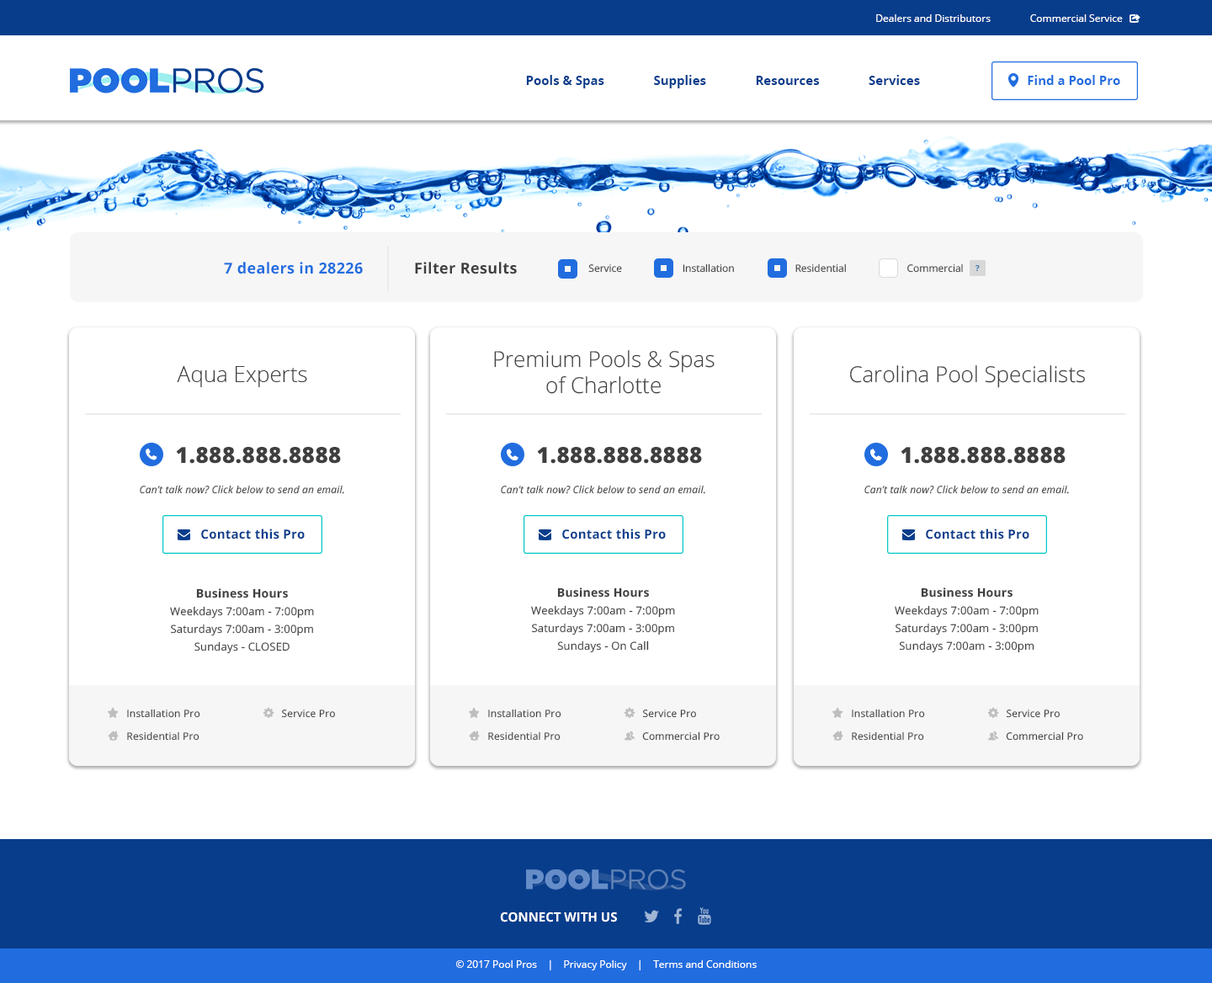
<style>
.page{position:relative;width:1212px;height:983px;background:#ffffff}
.page>*{position:absolute;margin:0}
.t1{font:10.1px "OpenSans";color:#ffffff}
.t2{font:12.6px "OpenSans-Bold";color:#083d8c}
.t3{font:12.6px "OpenSans-Bold";color:#216ddf}
.t4{font:15.1px "OpenSans-Bold";letter-spacing:0.02em;color:#216ddf}
.t5{font:15.1px "OpenSans-Bold";letter-spacing:0.02em;color:#3f3f3f}
.t6{font:10.1px "OpenSans";color:#3f3f3f}
.t7{font:21.9px "OpenSans-Light";color:#3f3f3f}
.t8{font:22.1px "OpenSans-Extrabold";letter-spacing:0.02em;color:#3f3f3f}
.t9{font:11.8px "SSPika";letter-spacing:0.02em;color:#ffffff}
.t10{font:22px "OpenSans-Extrabold";letter-spacing:0.02em;color:#3f3f3f}
.t11{font:10.1px "OpenSans-Italic";letter-spacing:0.02em;color:#3f3f3f}
.t12{font:12.6px "OpenSans-Bold";letter-spacing:0.02em;color:#083d8c}
.t13{font:10.9px/17.7px "OpenSans";letter-spacing:0.02em;color:#3f3f3f}
.t14{font:11.8px "OpenSans-Bold";letter-spacing:0.02em;color:#3f3f3f}
.t15{font:10.1px/22.7px "OpenSans";letter-spacing:0.02em;color:#3f3f3f}
.t16{font:12.8px "OpenSans-Bold";color:#ffffff}
</style>
<div class="page">
<p class="t1" style="left:877px;top:14px;width:246px;height:8px">Dealers and Distributors               Commercial Service</p>
<p class="t2" style="left:526px;top:75px;width:394px;height:13px">Pools &amp; Spas               Supplies               Resources               Services</p>
<p class="t3" style="left:1028px;top:75px;width:93px;height:10px">Find a Pool Pro</p>
<p class="t4" style="left:224px;top:262px;width:139px;height:12px">7 dealers in 28226</p>
<p class="t5" style="left:415px;top:262px;width:102px;height:12px">Filter Results</p>
<p class="t6" style="left:589px;top:264px;width:374px;height:9px">Service                       Installation                       Residential                       Commercial</p>
<p class="t7" style="left:494px;top:350px;width:221px;height:44px;text-align:center">Premium Pools &amp; Spas<br>of Charlotte</p>
<p class="t7" style="left:850px;top:365px;width:235px;height:23px">Carolina Pool Specialists</p>
<p class="t7" style="left:177px;top:366px;width:130px;height:21px">Aqua Experts</p>
<p class="t8" style="left:176px;top:447px;width:165px;height:17px">1.888.888.8888</p>
<p class="t9" style="left:507px;top:449px;width:12px;height:12px">phone</p>
<p class="t10" style="left:537px;top:447px;width:165px;height:17px">1.888.888.8888</p>
<p class="t9" style="left:871px;top:449px;width:11px;height:12px">phone</p>
<p class="t10" style="left:901px;top:447px;width:165px;height:17px">1.888.888.8888</p>
<p class="t11" style="left:140px;top:485px;width:204px;height:9px">Can’t talk now? Click below to send an email.</p>
<p class="t11" style="left:501px;top:485px;width:205px;height:9px">Can’t talk now? Click below to send an email.</p>
<p class="t11" style="left:865px;top:485px;width:204px;height:9px">Can’t talk now? Click below to send an email.</p>
<p class="t12" style="left:201px;top:529px;width:104px;height:11px">Contact this Pro</p>
<p class="t12" style="left:562px;top:529px;width:104px;height:11px">Contact this Pro</p>
<p class="t12" style="left:926px;top:529px;width:104px;height:11px">Contact this Pro</p>
<p class="t13" style="left:170px;top:589px;width:144px;height:65px;text-align:center"><span class="t14">Business Hours<br></span>Weekdays 7:00am - 7:00pm<br>Saturdays 7:00am - 3:00pm<br>Sundays - CLOSED</p>
<p class="t13" style="left:531px;top:588px;width:144px;height:65px;text-align:center"><span class="t14">Business Hours<br></span>Weekdays 7:00am - 7:00pm<br>Saturdays 7:00am - 3:00pm<br>Sundays - On Call</p>
<p class="t13" style="left:895px;top:588px;width:144px;height:65px;text-align:center"><span class="t14">Business Hours<br></span>Weekdays 7:00am - 7:00pm<br>Saturdays 7:00am - 3:00pm<br>Sundays 7:00am - 3:00pm</p>
<p class="t15" style="left:127px;top:709px;width:208px;height:32px">Installation Pro                             Service Pro<br>Residential Pro</p>
<p class="t15" style="left:488px;top:709px;width:232px;height:32px">Installation Pro                             Service Pro<br>Residential Pro              Commercial Pro</p>
<p class="t15" style="left:852px;top:709px;width:232px;height:32px">Installation Pro                             Service Pro<br>Residential Pro              Commercial Pro</p>
<p class="t16" style="left:500px;top:913px;width:117px;height:10px">CONNECT WITH US</p>
<p class="t1" style="left:456px;top:961px;width:301px;height:10px">© 2017 Pool Pros    |    Privacy Policy    |    Terms and Conditions</p>
</div>
